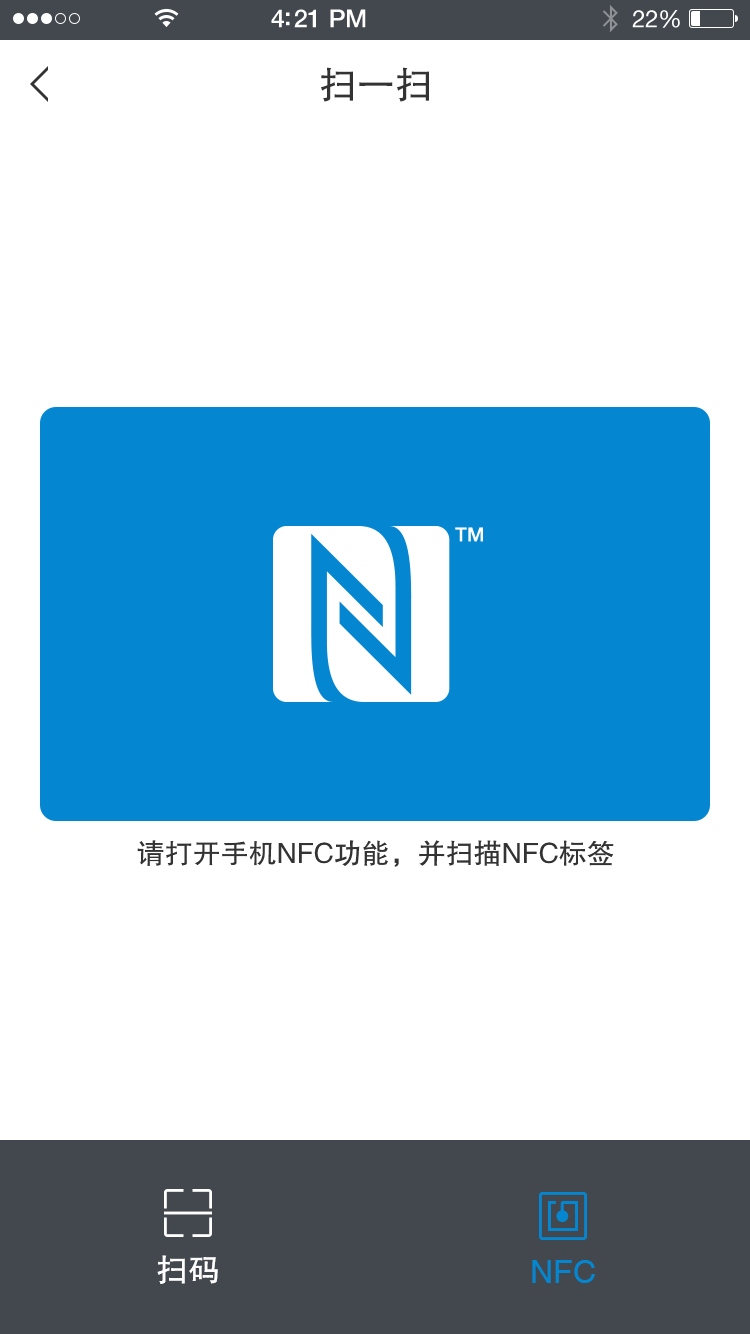
<style>
.page{position:relative;width:750px;height:1334px;background:#ffffff}
.page>*{position:absolute;margin:0}
.t1{font:38px "FZHTJW--GB1-0";color:#333333}
.t2{font:28px "FZHTJW--GB1-0";color:#333333}
.t3{font:32px "FZHTJW--GB1-0";color:#ffffff}
.t4{font:32px "Helvetica";color:#0487d0}
</style>
<div class="page">
<p class="t1" style="left:321px;top:67px;width:108px;height:35px">扫一扫</p>
<p class="t2" style="left:137px;top:840px;width:477px;height:27px">请打开手机NFC功能，并扫描NFC标签</p>
<p class="t3" style="left:157px;top:1255px;width:61px;height:29px">扫码</p>
<p class="t4" style="left:532px;top:1260px;width:63px;height:23px">NFC</p>
</div>
